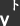
<style>
.page{position:relative;width:20px;height:26px;background:#333333}
.page>*{position:absolute;margin:0}
.t1{font:12px "DFKaiShu-SB-Estd-BF";color:#ffffff;font-weight:bold}
</style>
<div class="page">
<p class="t1" style="left:13px;top:0px;width:6px;height:11px">卜</p>
</div>
